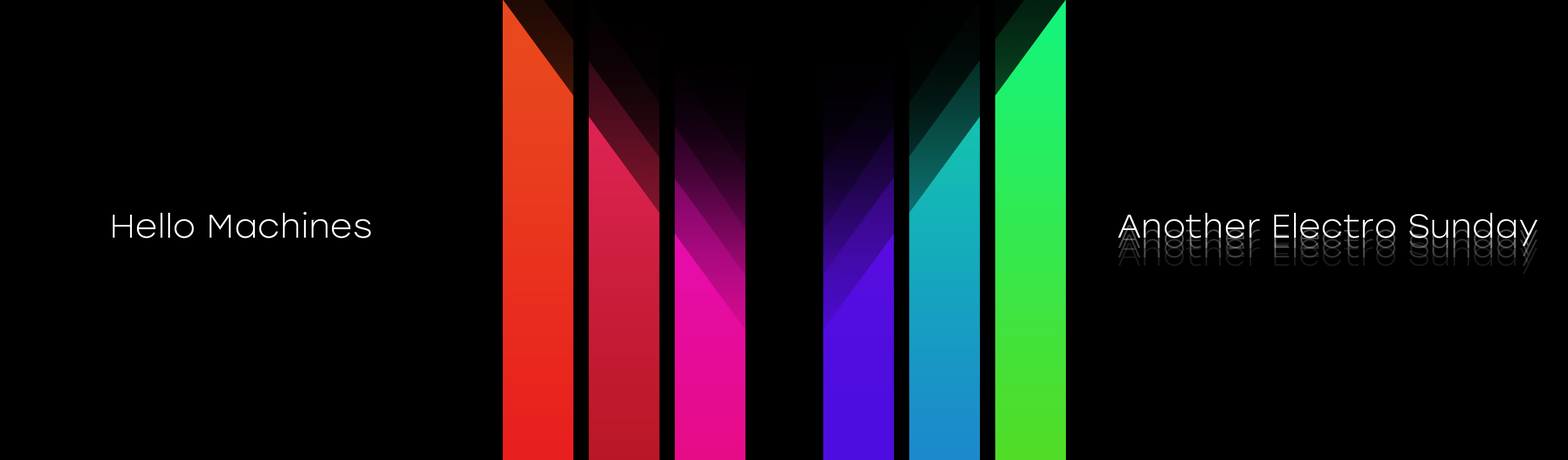
<style>
.page{position:relative;width:1568px;height:460px;background:#000000}
.page>*{position:absolute;margin:0}
.t1{font:32.7px "Stolzl-Light";letter-spacing:0.005em;color:#ffffff;scale:1.04 1}
</style>
<div class="page">
<p class="t1" style="left:113px;top:212px;width:258px;height:26px">Hello Machines</p>
<p class="t1" style="left:1118px;top:213px;width:419px;height:33px">Another Electro Sunday</p>
</div>
